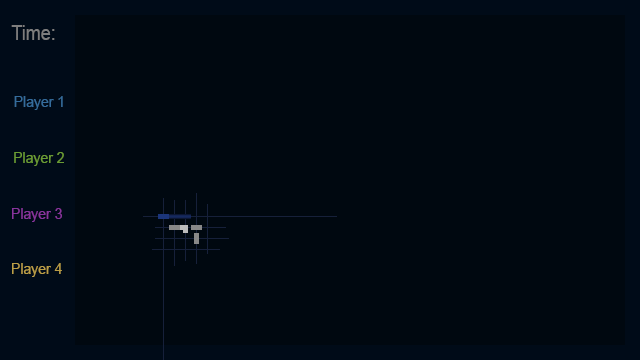
<style>
.page{position:relative;width:640px;height:360px;background:#000810}
.page>*{position:absolute;margin:0}
.t1{font:19.8px "ArialMT";color:#7e7e7e;scale:0.91 1}
.t2{font:15.4px "ArialMT";color:#346c9c;scale:0.91 1}
.t3{font:15.4px "ArialMT";color:#6a9c34;scale:0.91 1}
.t4{font:15.4px "ArialMT";color:#87349c;scale:0.91 1}
.t5{font:15.4px "ArialMT";color:#ba9e47;scale:0.91 1}
</style>
<div class="page">
<p class="t1" style="left:11px;top:25px;width:44px;height:15px">Time:</p>
<p class="t2" style="left:14px;top:96px;width:49px;height:14px">Player 1</p>
<p class="t3" style="left:14px;top:152px;width:50px;height:14px">Player 2</p>
<p class="t4" style="left:12px;top:208px;width:50px;height:14px">Player 3</p>
<p class="t5" style="left:12px;top:263px;width:50px;height:14px">Player 4</p>
</div>
